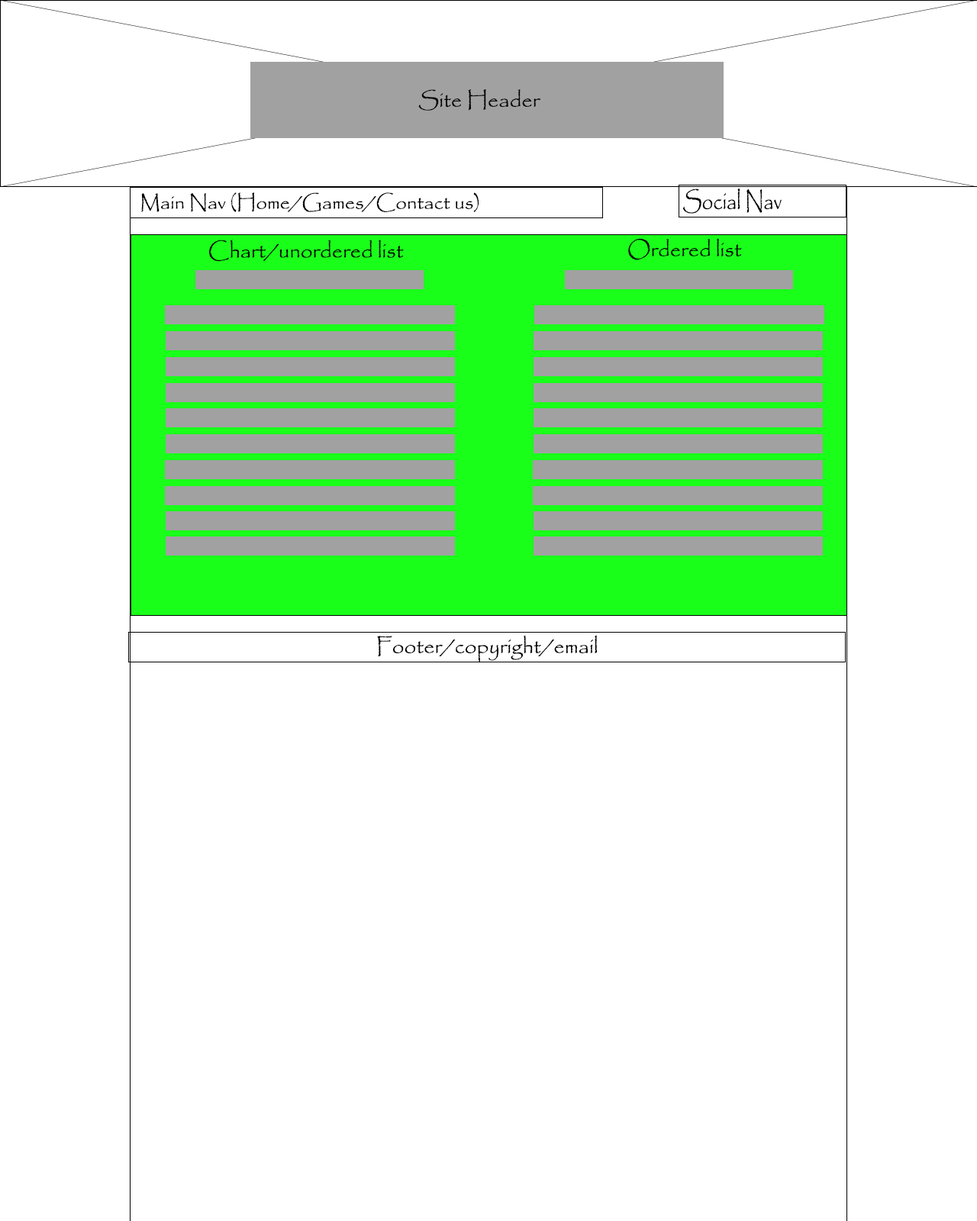
<style>
.page{position:relative;width:977px;height:1221px;background:#ffffff}
.page>*{position:absolute;margin:0}
.t1{font:21.4px "Papyrus-Regular";color:#000000}
.t2{font:19.8px "Papyrus-Regular";color:#000000}
.t3{font:25.1px "Papyrus-Regular";color:#000000;scale:0.79 1}
</style>
<div class="page">
<p class="t1" style="left:418px;top:89px;width:123px;height:22px">Site Header</p>
<p class="t2" style="left:141px;top:192px;width:337px;height:20px">Main Nav (Home/Games/Contact us)</p>
<p class="t3" style="left:682px;top:188px;width:99px;height:26px">Social Nav</p>
<p class="t1" style="left:209px;top:240px;width:195px;height:22px">Chart/unordered list</p>
<p class="t1" style="left:628px;top:238px;width:114px;height:22px">Ordered list</p>
<p class="t1" style="left:377px;top:635px;width:220px;height:27px">Footer/copyright/email</p>
</div>
